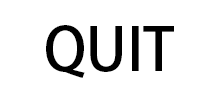
<style>
.page{position:relative;width:220px;height:95px;background:#ffffff}
.page>*{position:absolute;margin:0}
.t1{font:58.3px "AdobeFanHeitiStd-Bold";color:#000000}
</style>
<div class="page">
<p class="t1" style="left:46px;top:25px;width:128px;height:53px">QUIT</p>
</div>
